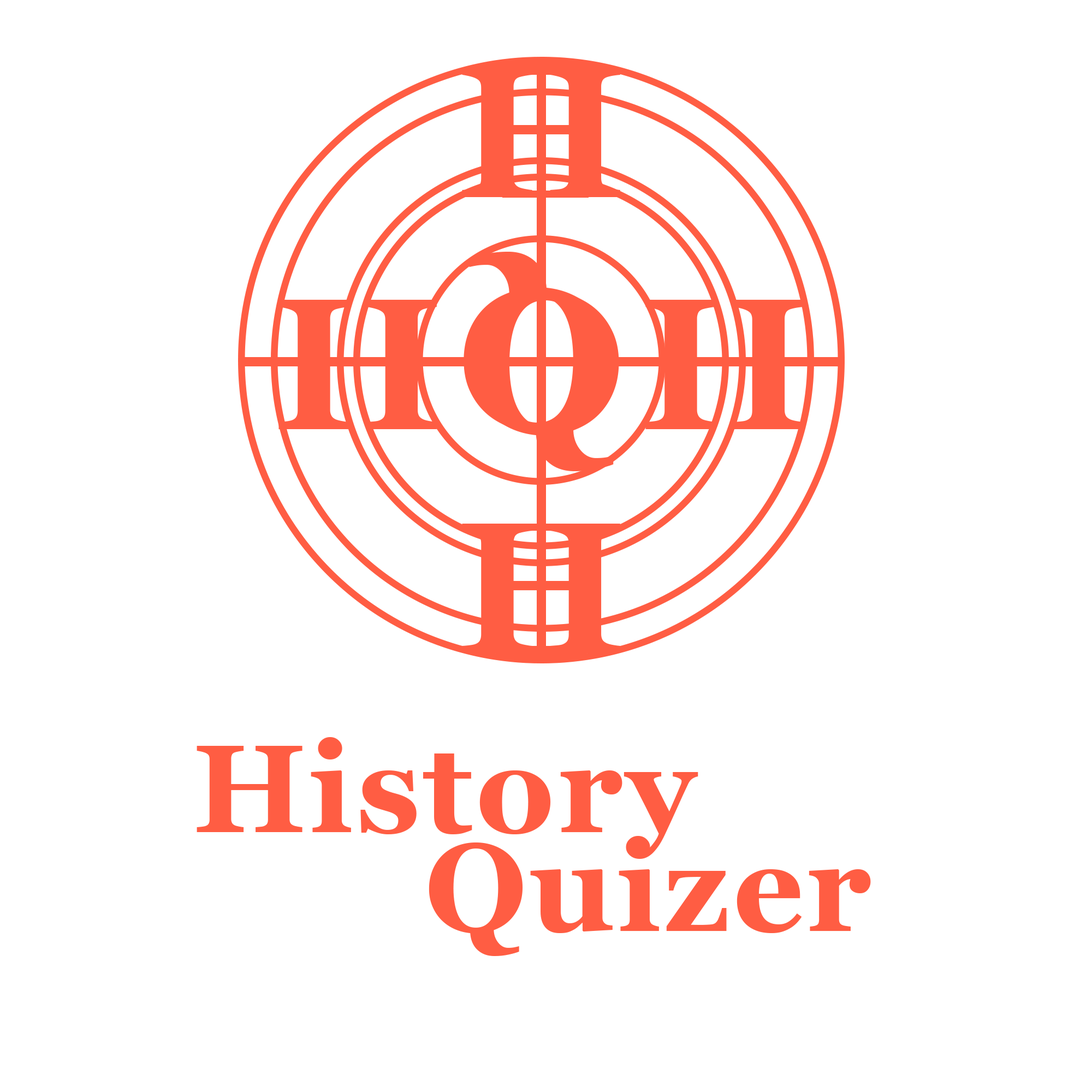
<style>
.page{position:relative;width:1092px;height:1092px;background:#ffffff}
.page>*{position:absolute;margin:0}
.t1{font:186.5px "Georgia-Bold";color:#ff5d43}
.t2{font:196.9px "Georgia-Bold";color:#ff5d43}
.t3{font:124.4px "Georgia-Bold";letter-spacing:0.025em;color:#ff5d43}
</style>
<div class="page">
<p class="t1" style="left:462px;top:68px;width:158px;height:129px">H</p>
<p class="t2" style="left:464px;top:252px;width:148px;height:180px;rotate:180deg">Q</p>
<p class="t2" style="left:471px;top:291px;width:148px;height:180px">Q</p>
<p class="t1" style="left:278px;top:300px;width:159px;height:129px">H</p>
<p class="t1" style="left:645px;top:300px;width:159px;height:129px">H</p>
<p class="t1" style="left:462px;top:524px;width:158px;height:129px">H</p>
<p class="t3" style="left:197px;top:737px;width:501px;height:122px">History</p>
<p class="t3" style="left:429px;top:836px;width:442px;height:120px">Quizer</p>
</div>
